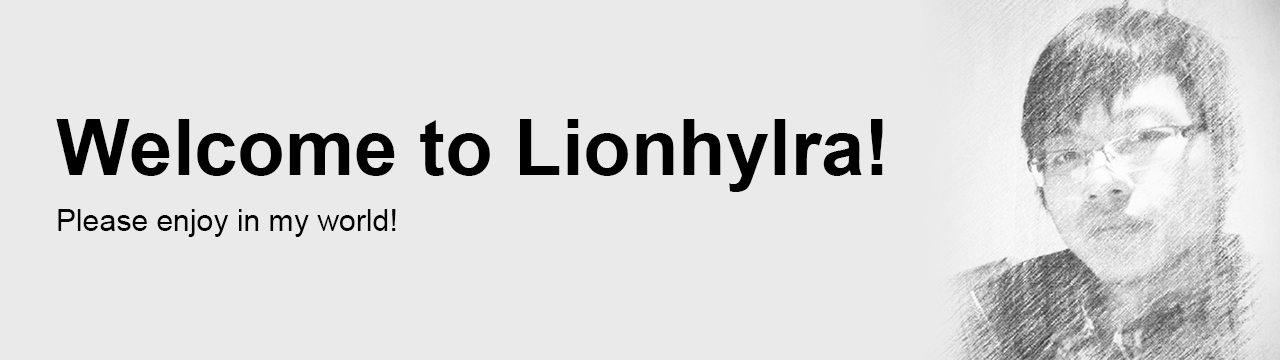
<style>
.page{position:relative;width:1280px;height:360px;background:#eaeaea}
.page>*{position:absolute;margin:0}
.t1{font:30.1px/97.2px "ArialMT";color:#000000}
.t2{font:77.8px/97.2px "Arial-BoldMT";color:#000000}
</style>
<div class="page">
<p class="t1" style="left:56px;top:119px;width:827px;height:118px"><span class="t2">Welcome to Lionhylra!<br></span>Please enjoy in my world!</p>
</div>
